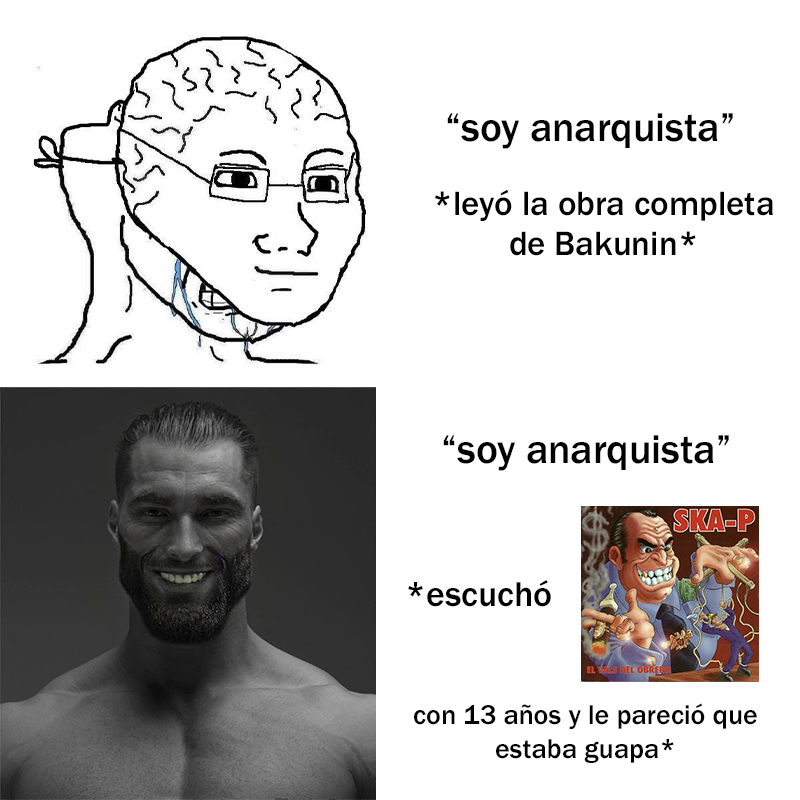
<style>
.page{position:relative;width:800px;height:800px;background:#ffffff}
.page>*{position:absolute;margin:0}
.t1{font:41.4px "FranklinGothic-Medium";color:#000000}
.t2{font:34.9px "FranklinGothic-Medium";color:#000000}
.t3{font:35.9px "FranklinGothic-Medium";color:#000000}
.t4{font:28.1px "FranklinGothic-Medium";color:#000000}
</style>
<div class="page">
<p class="t1" style="left:447px;top:113px;width:286px;height:36px">“soy anarquista”</p>
<p class="t2" style="left:435px;top:189px;width:338px;height:67px;text-align:center">*leyó la obra completa<br>de Bakunin*</p>
<p class="t1" style="left:443px;top:435px;width:286px;height:36px">“soy anarquista”</p>
<p class="t3" style="left:408px;top:580px;width:143px;height:27px">*escuchó</p>
<p class="t4" style="left:414px;top:703px;width:343px;height:60px;text-align:center">con 13 años y le pareció que<br>estaba guapa*</p>
</div>
